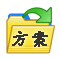
<style>
.page{position:relative;width:60px;height:60px;background:#ffffff}
.page>*{position:absolute;margin:0}
.t1{font:18px "¿¬Ìå";letter-spacing:0.075em;color:#333333;font-weight:bold}
</style>
<div class="page">
<p class="t1" style="left:12px;top:31px;width:36px;height:16px">方案</p>
</div>
